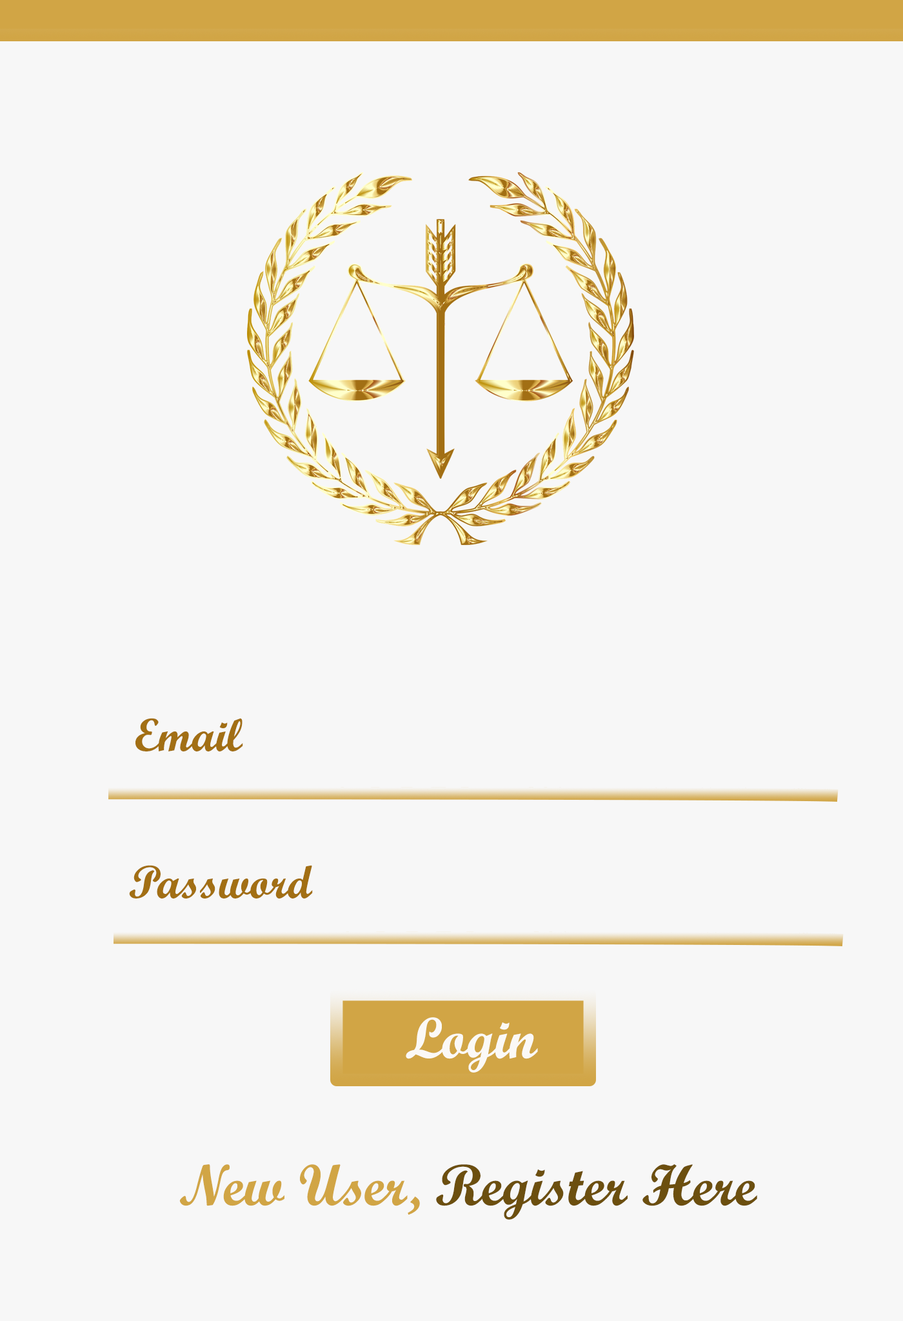
<style>
.page{position:relative;width:903px;height:1321px;background:#f7f7f7}
.page>*{position:absolute;margin:0}
.t1{font:46.4px "ScriptMTBold";color:#a26f14}
.t2{font:58px "ScriptMTBold";color:#fbf9f6}
.t3{font:58px "ScriptMTBold";color:#6c4f0f}
.t4{font:58px "ScriptMTBold";color:#d1a545}
</style>
<div class="page">
<p class="t1" style="left:135px;top:718px;width:108px;height:33px">Email</p>
<p class="t1" style="left:129px;top:865px;width:184px;height:33px">Password</p>
<p class="t2" style="left:406px;top:1017px;width:132px;height:55px">Login</p>
<p class="t3" style="left:179px;top:1164px;width:578px;height:55px"><span class="t4">New User, </span>Register Here</p>
</div>
